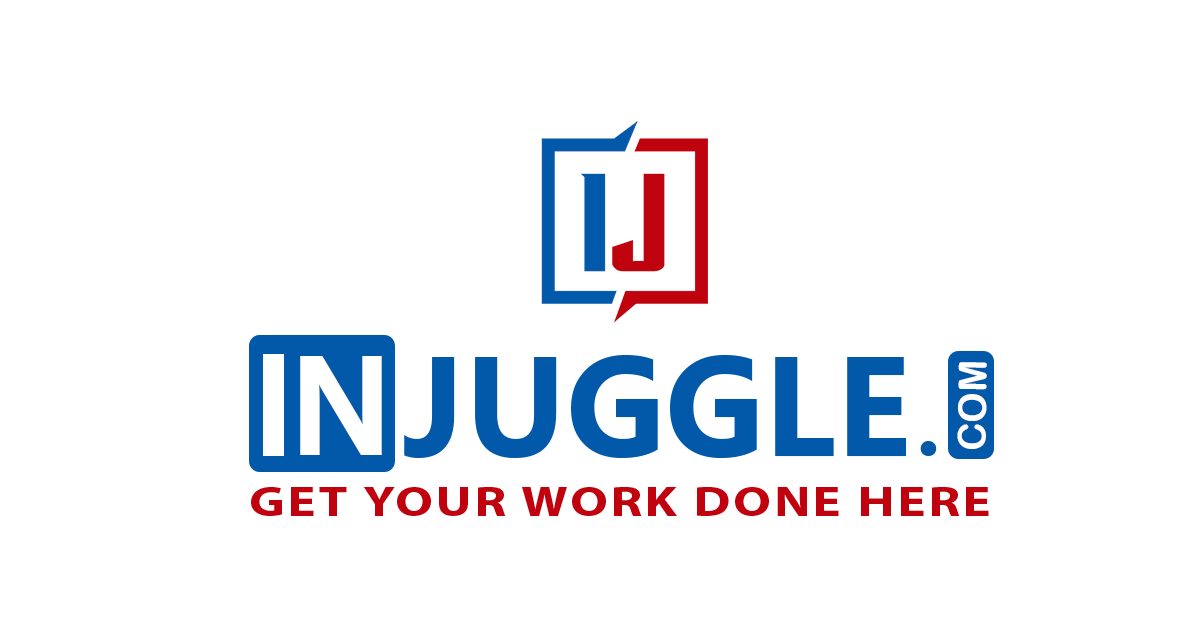
<style>
.page{position:relative;width:1200px;height:628px;background:#ffffff}
.page>*{position:absolute;margin:0}
.t1{font:142.4px "MyanmarText-Bold";color:#ffffff;scale:0.91 1}
.t2{font:142.2px "MicrosoftNewTaiLue-Bold";color:#0258a9}
.t3{font:38.4px "ArialRoundedMTBold";color:#fffefe}
.t4{font:105.1px "ArialRoundedMTBold";color:#0258a9}
.t5{font:41.9px "MyriadPro-Bold";letter-spacing:0.06em;color:#c0020f;scale:1.25 1}
</style>
<div class="page">
<p class="t1" style="left:300px;top:356px;width:82px;height:99px">N</p>
<p class="t2" style="left:404px;top:355px;width:502px;height:103px">JUGGLE</p>
<p class="t3" style="left:957px;top:362px;width:30px;height:87px;rotate:-89deg">COM</p>
<p class="t4" style="left:920px;top:441px;width:17px;height:15px">.</p>
<p class="t5" style="left:251px;top:487px;width:738px;height:29px">GET YOUR WORK DONE HERE</p>
</div>
